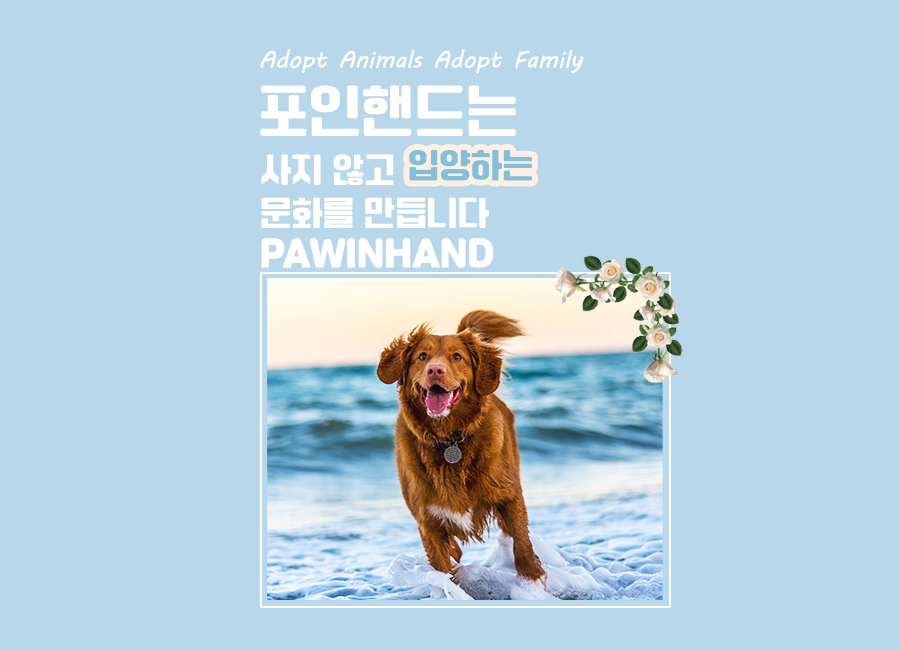
<style>
.page{position:relative;width:900px;height:650px;background:#b8d7eb}
.page>*{position:absolute;margin:0}
.t1{font:24px "MVBoli";letter-spacing:-0.005em;color:#ffffff}
.t2{font:60px "MBC-1961GulimM";color:#ffffff}
.t3{font:36px "MBC-1961GulimM";color:#82bfd9}
.t4{font:36px "MBC-1961GulimM";color:#ffffff}
.t5{font:36px "Jalnan";color:#ffffff}
</style>
<div class="page">
<p class="t1" style="left:260px;top:49px;width:324px;height:25px">Adopt Animals Adopt Family</p>
<p class="t2" style="left:260px;top:85px;width:256px;height:51px">포인핸드는</p>
<p class="t3" style="left:409px;top:150px;width:123px;height:31px">입양하는</p>
<p class="t4" style="left:261px;top:154px;width:228px;height:74px">사지 않고<br>문화를 만듭니다</p>
<p class="t5" style="left:261px;top:238px;width:233px;height:30px">PAWINHAND</p>
</div>
